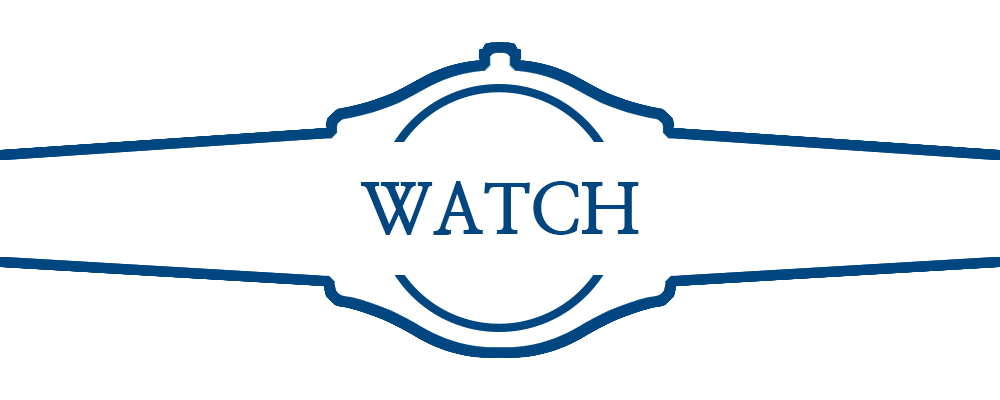
<style>
.page{position:relative;width:1000px;height:400px;background:#ffffff}
.page>*{position:absolute;margin:0}
.t1{font:70px "NanumMyeongjoExtraBold";color:#004680}
</style>
<div class="page">
<p class="t1" style="left:361px;top:181px;width:278px;height:54px">WATCH</p>
</div>
